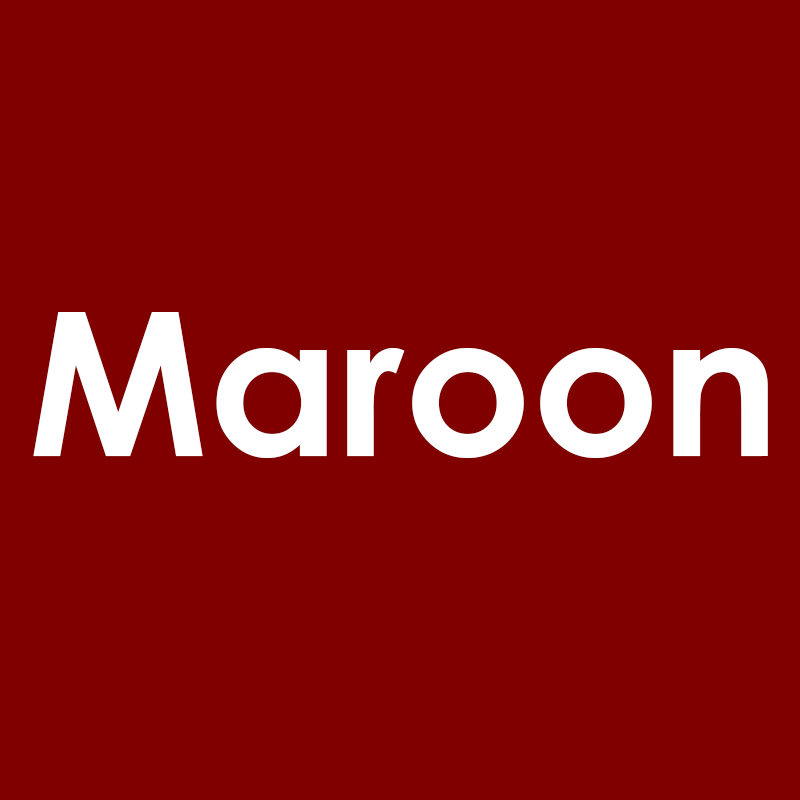
<style>
.page{position:relative;width:800px;height:800px;background:#800000}
.page>*{position:absolute;margin:0}
.t1{font:200px "CenturyGothic-Bold";color:#ffffff}
</style>
<div class="page">
<p class="t1" style="left:33px;top:312px;width:735px;height:146px">Maroon</p>
</div>
